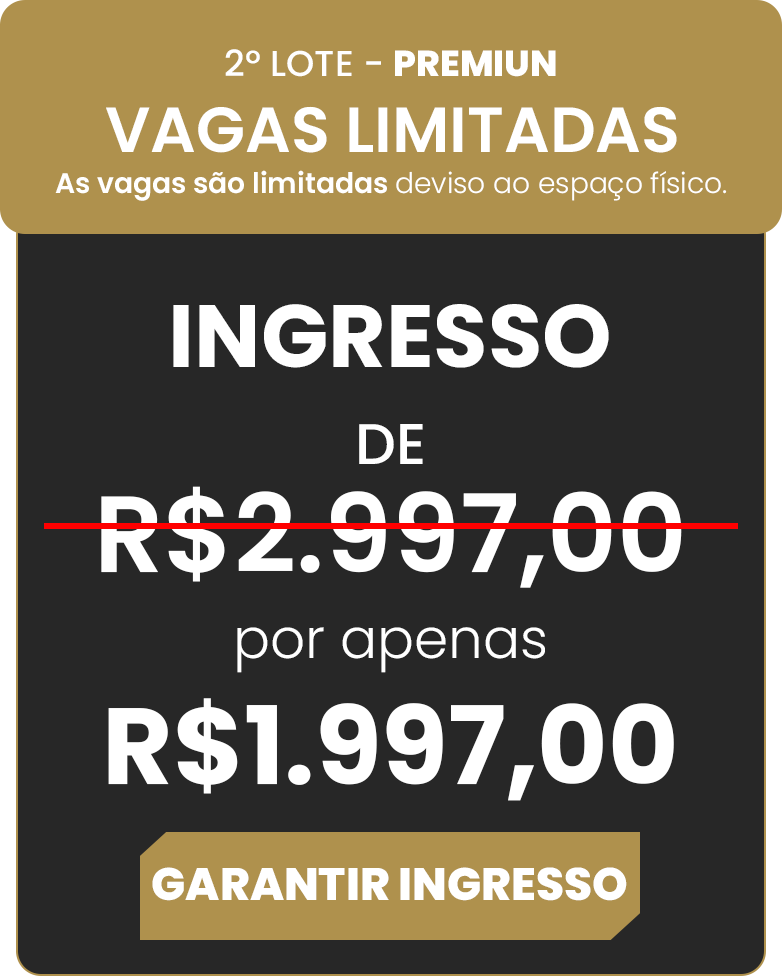
<style>
.page{position:relative;width:782px;height:976px;background:#272727}
.page>*{position:absolute;margin:0}
.t1{font:36px "Poppins-Medium";color:#ffffff}
.t2{font:36px "Poppins-ExtraBold";color:#ffffff}
.t3{font:63.7px "Poppins-SemiBold";color:#ffffff}
.t4{font:28.4px "Poppins-Light";color:#ffffff}
.t5{font:28.4px "Poppins-SemiBold";color:#ffffff}
.t6{font:88.4px "Poppins-Bold";color:#ffffff}
.t7{font:57.3px "Poppins-Medium";color:#ffffff}
.t8{font:108.1px "Poppins-SemiBold";color:#ffffff}
.t9{font:55.2px "Poppins-Light";color:#ffffff}
.t10{font:108.1px "Poppins-Bold";color:#ffffff}
.t11{font:45.6px "Poppins-ExtraBold";color:#ffffff}
</style>
<div class="page">
<p class="t1" style="left:225px;top:49px;width:331px;height:28px">2º LOTE - <span class="t2">PREMIUN</span></p>
<p class="t3" style="left:106px;top:106px;width:571px;height:47px">VAGAS LIMITADAS</p>
<p class="t4" style="left:55px;top:170px;width:672px;height:31px"><span class="t5">As vagas são limitadas </span>deviso ao espaço físico.</p>
<p class="t6" style="left:173px;top:304px;width:436px;height:64px">INGRESSO</p>
<p class="t7" style="left:359px;top:424px;width:64px;height:40px">DE</p>
<p class="t8" style="left:101px;top:486px;width:581px;height:102px">R$2.997,00</p>
<p class="t9" style="left:237px;top:627px;width:308px;height:46px">por apenas</p>
<p class="t10" style="left:108px;top:698px;width:566px;height:103px">R$1.997,00</p>
<p class="t11" style="left:152px;top:867px;width:475px;height:34px">GARANTIR INGRESSO</p>
</div>
